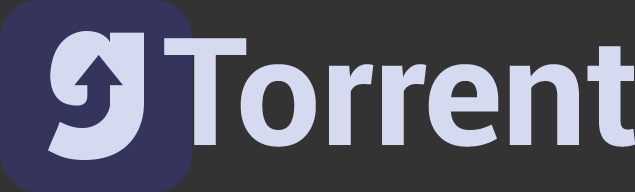
<style>
.page{position:relative;width:635px;height:192px;background:#333333}
.page>*{position:absolute;margin:0}
.t1{font:150px "Roboto-Bold";color:#d6daf0}
</style>
<div class="page">
<p class="t1" style="left:164px;top:38px;width:472px;height:109px">Torrent</p>
</div>
